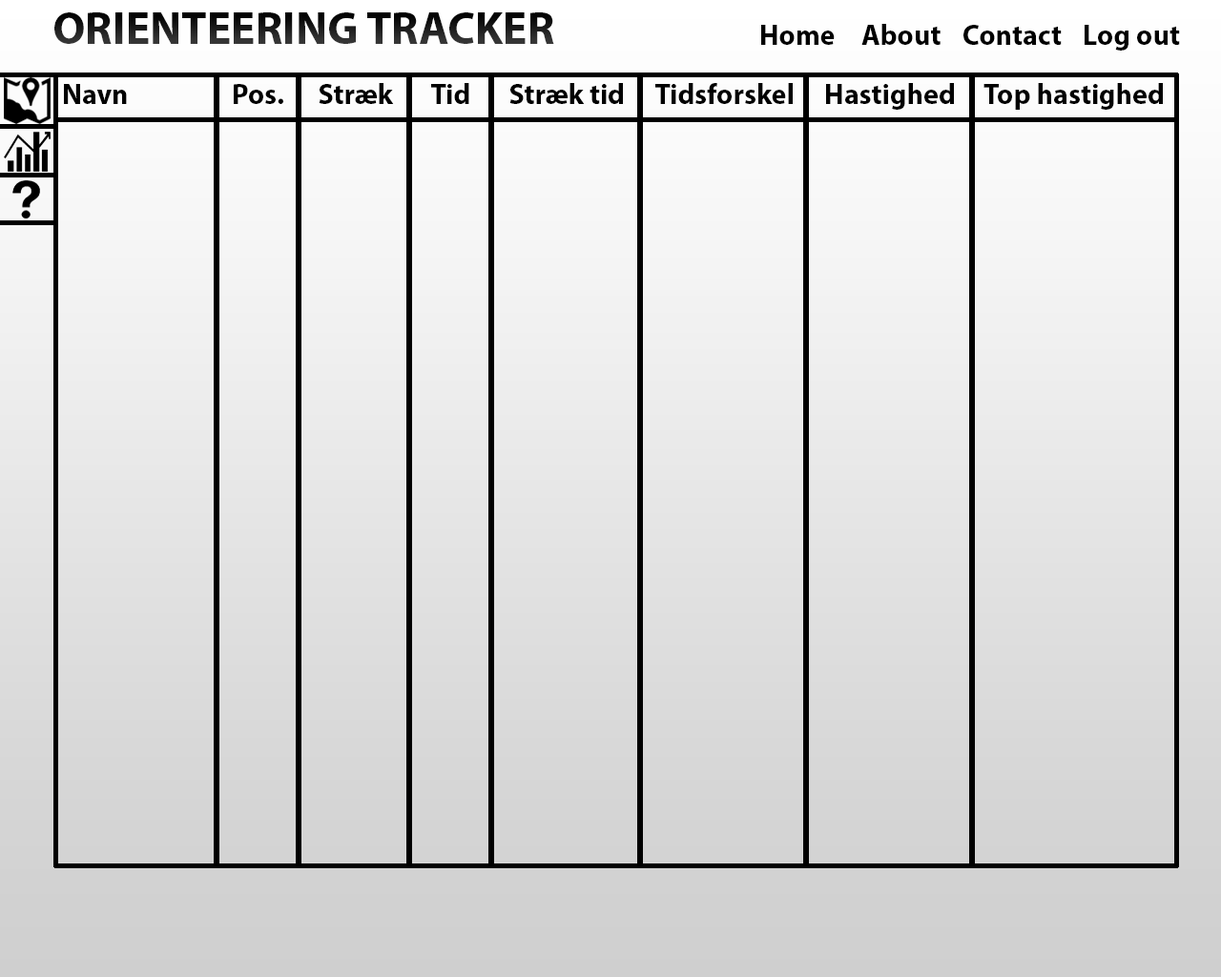
<style>
.page{position:relative;width:1221px;height:977px}
.page>*{position:absolute;margin:0}
.t1{font:45.8px "MyriadPro-Bold"}
.t2{font:28.6px "MyriadPro-Bold";color:#000000}
</style>
<div class="page">
<p class="t1" style="left:54px;top:12px;width:500px;height:32px">ORIENTEERING TRACKER</p>
<p class="t2" style="left:761px;top:25px;width:74px;height:20px">Home</p>
<p class="t2" style="left:861px;top:24px;width:79px;height:21px">About</p>
<p class="t2" style="left:963px;top:25px;width:99px;height:20px">Contact</p>
<p class="t2" style="left:1084px;top:25px;width:96px;height:26px">Log out</p>
<p class="t2" style="left:64px;top:84px;width:63px;height:20px">Navn</p>
<p class="t2" style="left:234px;top:84px;width:49px;height:20px">Pos.</p>
<p class="t2" style="left:319px;top:83px;width:75px;height:21px">Stræk</p>
<p class="t2" style="left:431px;top:83px;width:38px;height:21px">Tid</p>
<p class="t2" style="left:509px;top:83px;width:114px;height:21px">Stræk tid</p>
<p class="t2" style="left:655px;top:83px;width:138px;height:21px">Tidsforskel</p>
<p class="t2" style="left:826px;top:83px;width:128px;height:27px">Hastighed</p>
<p class="t2" style="left:983px;top:83px;width:180px;height:27px">Top hastighed</p>
</div>
